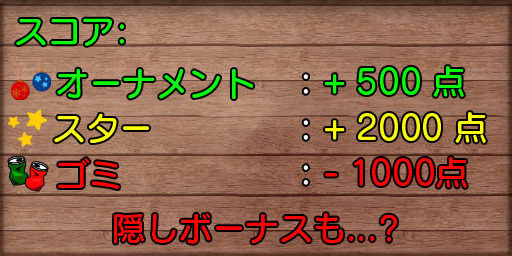
<style>
.page{position:relative;width:512px;height:256px}
.page>*{position:absolute;margin:0}
.t1{font:33.3px "SeuratProN-DB";color:#00ff08}
.t2{font:33.3px/45.8px "SeuratProN-DB";color:#ffff00}
.t3{font:33.3px/45.8px "SeuratProN-DB";color:#ffffff}
.t4{font:33.3px/45.8px "SeuratProN-DB";color:#00ff08}
.t5{font:33.3px/45.8px "SeuratProN-DB";color:#ff0000}
.t6{font:33.3px "SeuratProN-DB";color:#ffff00}
.t7{font:33.3px "SeuratProN-DB";color:#ff0000}
</style>
<div class="page">
<p class="t1" style="left:16px;top:18px;width:108px;height:28px">スコア:</p>
<p class="t1" style="left:57px;top:68px;width:196px;height:31px">オーナメント</p>
<p class="t2" style="left:303px;top:66px;width:183px;height:122px"><span class="t3">:</span><span class="t4"> + 500 点<br></span><span class="t3">: </span>+ 2000 点<br><span class="t3">:</span><span class="t5"> - 1000点</span></p>
<p class="t6" style="left:54px;top:113px;width:95px;height:30px">スター</p>
<p class="t7" style="left:58px;top:158px;width:62px;height:31px">ゴミ</p>
<p class="t7" style="left:114px;top:213px;width:283px;height:31px">隠しボーナスも...?</p>
</div>
